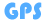
<style>
.page{position:relative;width:46px;height:22px;background:#ffffff}
.page>*{position:absolute;margin:0}
.t1{font:24px "Bauhaus93";color:#54adff}
</style>
<div class="page">
<p class="t1" style="left:4px;top:2px;width:38px;height:18px">GPS</p>
</div>
